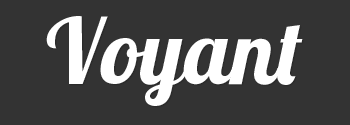
<style>
.page{position:relative;width:350px;height:125px;background:#333333}
.page>*{position:absolute;margin:0}
.t1{font:90px "Lobster1.4";color:#ffffff}
</style>
<div class="page">
<p class="t1" style="left:46px;top:16px;width:257px;height:90px">Voyant</p>
</div>
